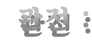
<style>
.page{position:relative;width:92px;height:40px;background:#ffffff}
.page>*{position:absolute;margin:0}
.t1{font:26.9px "SDKukdetopokki-bBd";letter-spacing:0.08em}
</style>
<div class="page">
<p class="t1" style="left:18px;top:6px;width:71px;height:25px">관전 :</p>
</div>
